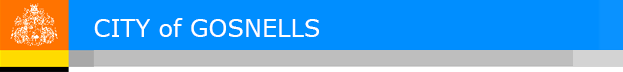
<style>
.page{position:relative;width:623px;height:72px;background:#008eff}
.page>*{position:absolute;margin:0}
.t1{font:24px "Verdana";color:#ffffff}
</style>
<div class="page">
<p class="t1" style="left:94px;top:18px;width:225px;height:19px">CITY of GOSNELLS</p>
</div>
